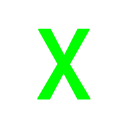
<style>
.page{position:relative;width:128px;height:128px;background:#ffffff}
.page>*{position:absolute;margin:0}
.t1{font:141.7px "Consolas";letter-spacing:0.085em;color:#00ff00;font-weight:bold;scale:0.76 1}
</style>
<div class="page">
<p class="t1" style="left:37px;top:28px;width:54px;height:72px">x</p>
</div>
